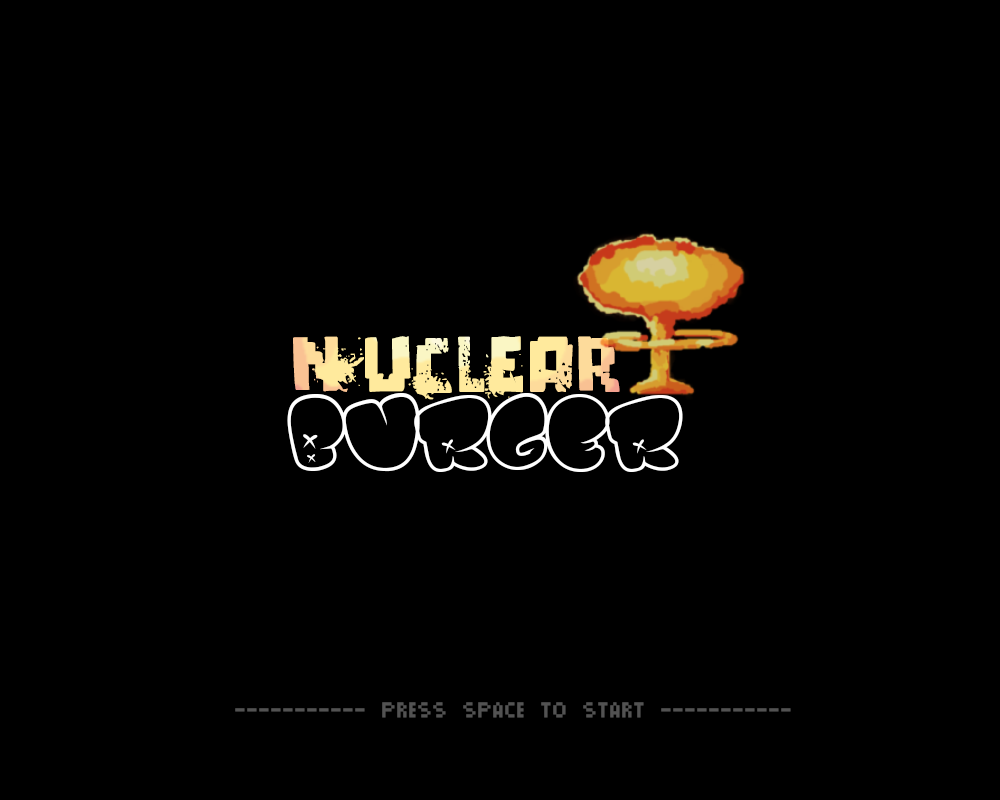
<style>
.page{position:relative;width:1000px;height:800px;background:#000000}
.page>*{position:absolute;margin:0}
.t1{font:79.4px "pixeldead";color:#feea9d}
.t2{font:120px "BOMBFONT";color:#ffffff}
.t3{font:48px "Pixels";color:#525252}
</style>
<div class="page">
<p class="t1" style="left:293px;top:336px;width:327px;height:64px">n uclear</p>
<p class="t2" style="left:287px;top:393px;width:396px;height:79px">burger</p>
<p class="t3" style="left:235px;top:702px;width:556px;height:16px">----------- press space to start -----------</p>
</div>
